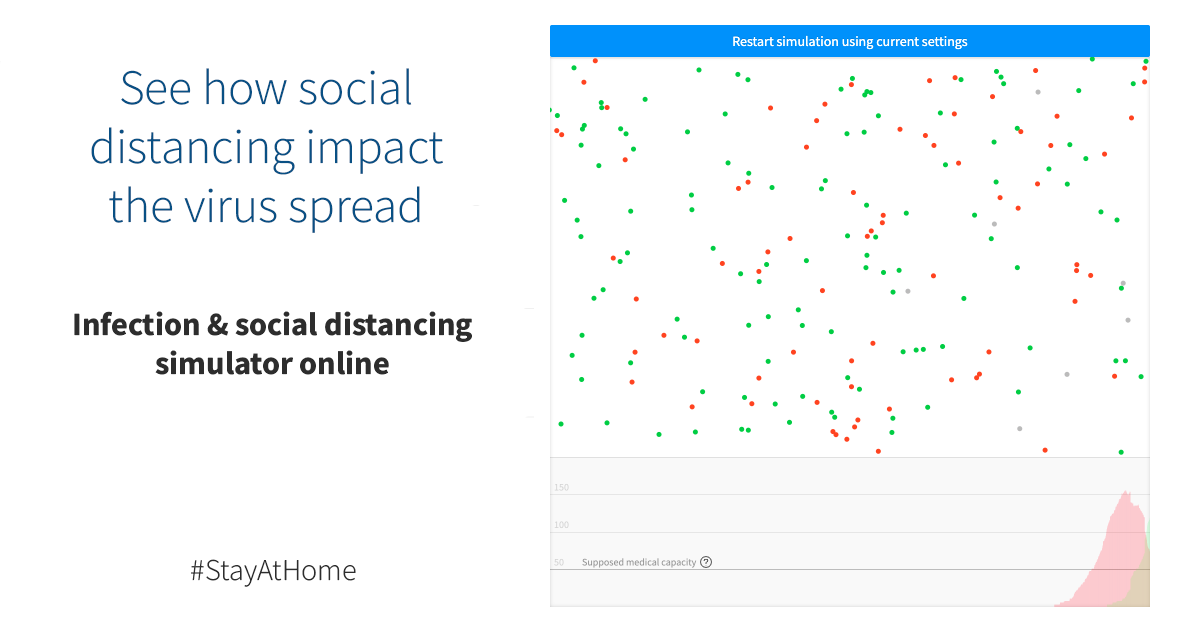
<style>
.page{position:relative;width:1200px;height:630px;background:#ffffff}
.page>*{position:absolute;margin:0}
.t1{font:49.4px "SourceSansRoman-Light";color:#095084}
.t2{font:32.4px "SourceSansRoman-Bold";color:#2d2d2d}
.t3{font:30.2px "SourceSansRoman-Light";color:#2d2d2d}
</style>
<div class="page">
<p class="t1" style="left:91px;top:68px;width:352px;height:165px;text-align:center">See how social<br>distancing impact<br>the virus spread</p>
<p class="t2" style="left:74px;top:311px;width:398px;height:64px;text-align:center">Infection &amp; social distancing<br>simulator online</p>
<p class="t3" style="left:191px;top:559px;width:165px;height:28px">#StayAtHome</p>
</div>
